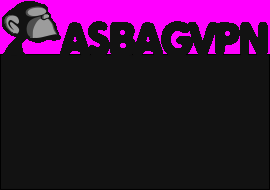
<style>
.page{position:relative;width:270px;height:190px;background:#121212}
.page>*{position:absolute;margin:0}
.t1{font:44.8px "ExposureCThree";color:#121212;scale:0.89 1}
</style>
<div class="page">
<p class="t1" style="left:60px;top:21px;width:208px;height:36px">ASBAGVPN</p>
</div>
